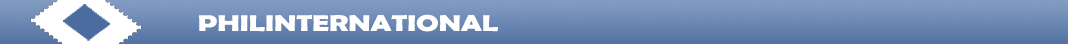
<style>
.page{position:relative;width:1068px;height:44px}
.page>*{position:absolute;margin:0}
.t1{font:22.8px "BerlinSansFBDemi-Bold";color:#ffffff;scale:1.32 1}
</style>
<div class="page">
<p class="t1" style="left:199px;top:14px;width:299px;height:18px">PHILINTERNATIONAL</p>
</div>
